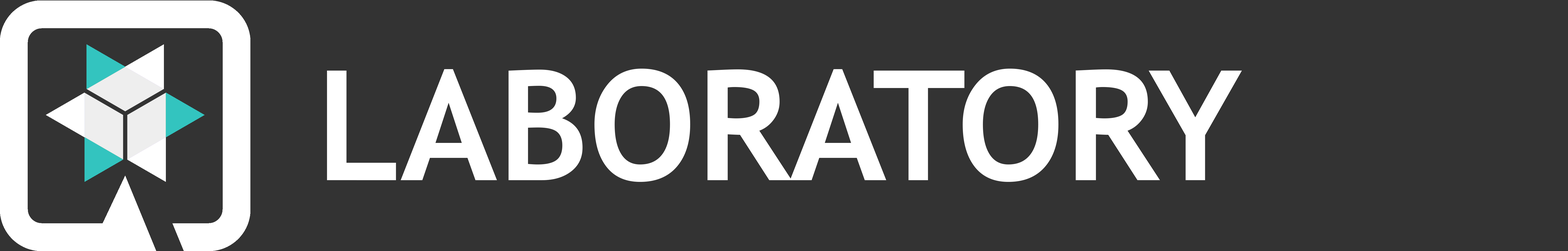
<style>
.page{position:relative;width:1568px;height:251px;background:#333333}
.page>*{position:absolute;margin:0}
.t1{font:153.1px "TrebuchetMS-Bold";color:#ffffff}
</style>
<div class="page">
<p class="t1" style="left:327px;top:69px;width:915px;height:113px">LABORATORY</p>
</div>
